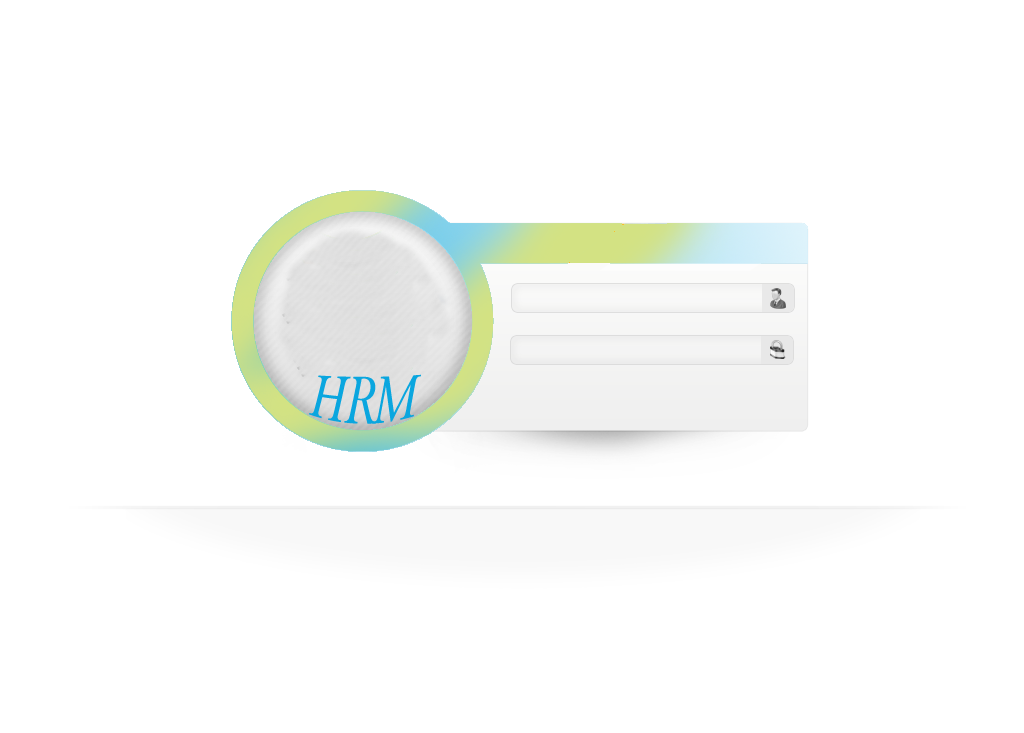
<style>
.page{position:relative;width:1024px;height:733px;background:#ffffff}
.page>*{position:absolute;margin:0}
.t1{font:48px "TimesNewRomanPS-ItalicMT";color:#0aa6df}
</style>
<div class="page">
<p class="t1" style="left:309px;top:374px;width:112px;height:50px">HRM</p>
</div>
